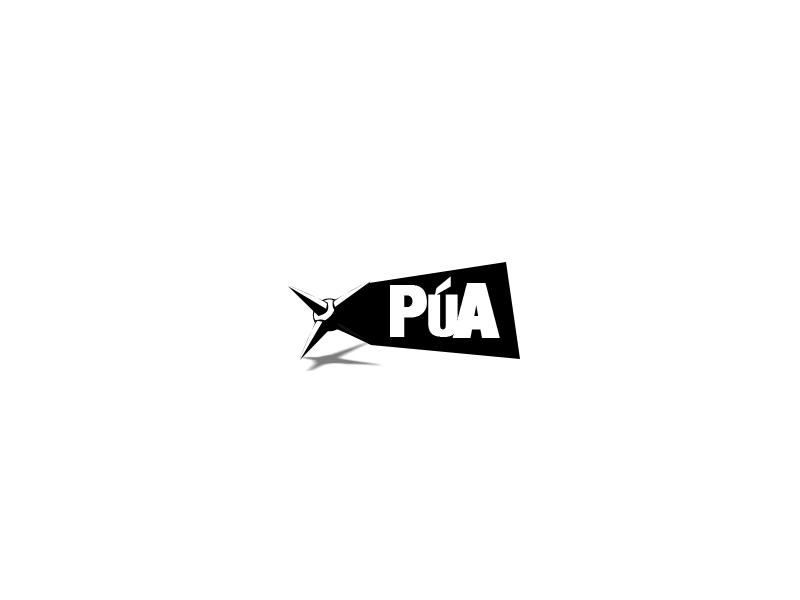
<style>
.page{position:relative;width:800px;height:600px;background:#ffffff}
.page>*{position:absolute;margin:0}
.t1{font:72px "AcmoDisplaySSiNormal";color:#ffffff;scale:1.04 1}
</style>
<div class="page">
<p class="t1" style="left:390px;top:276px;width:110px;height:62px">PÚA</p>
</div>
